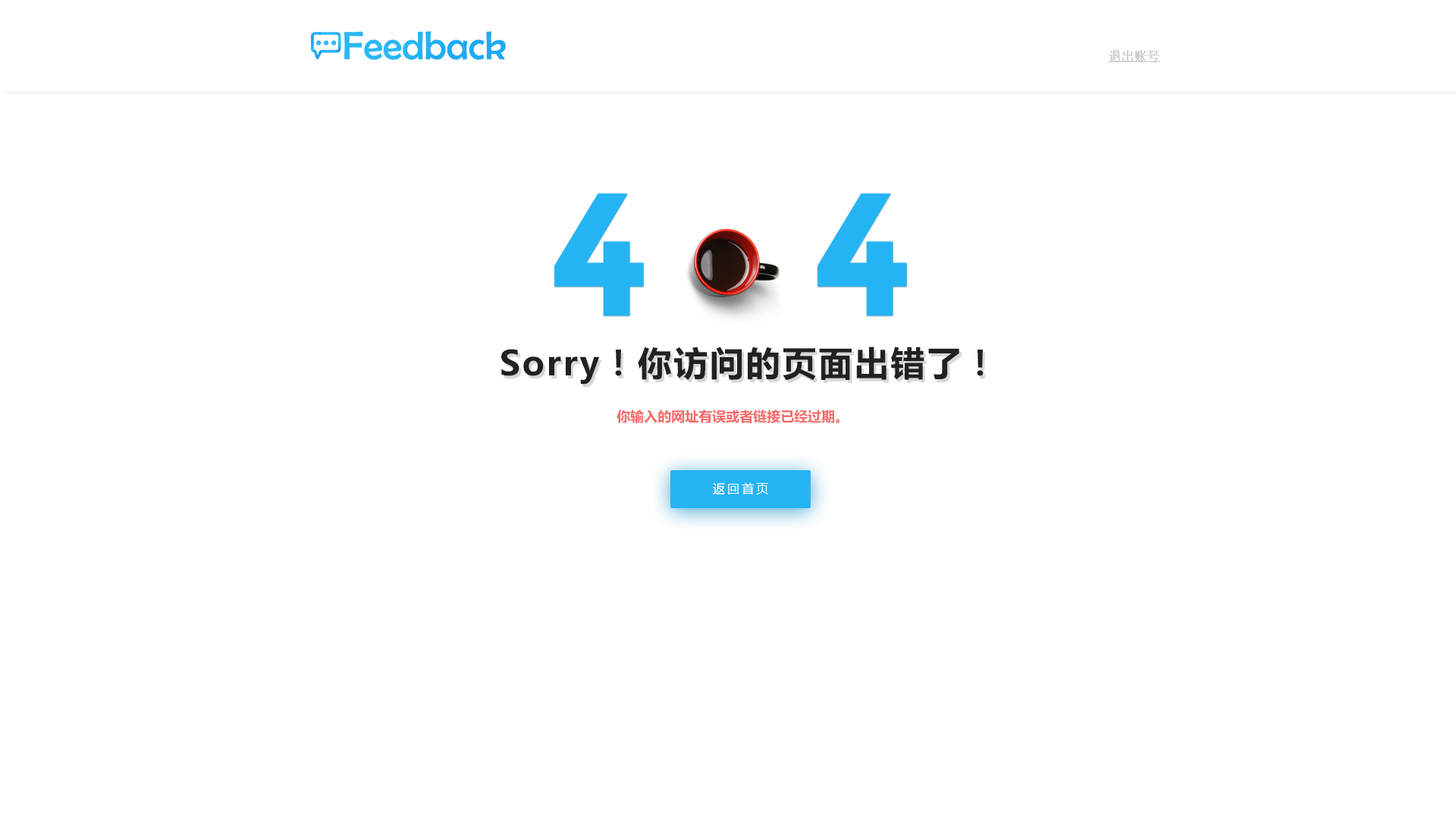
<style>
.page{position:relative;width:1456px;height:819px;background:#ffffff}
.page>*{position:absolute;margin:0}
.t1{font:12.1px "SimSun";color:#cecece;font-weight:bold;text-decoration:underline}
.t2{font:174.4px "Montserrat-Bold";letter-spacing:0.012em;color:#25b4f3;text-transform:uppercase}
.t3{font:34.1px "MicrosoftYaHei-Bold";letter-spacing:0.06em;color:#212121}
.t4{font:13.6px "MicrosoftYaHei-Bold";color:#f56969}
.t5{font:12.1px "MicrosoftYaHei";letter-spacing:0.192em;color:#ffffff;text-transform:uppercase}
</style>
<div class="page">
<p class="t1" style="left:1108px;top:50px;width:52px;height:12px">退出账号</p>
<p class="t2" style="left:554px;top:193px;width:90px;height:122px">4</p>
<p class="t2" style="left:817px;top:193px;width:90px;height:122px">4</p>
<p class="t3" style="left:501px;top:347px;width:483px;height:37px">Sorry！你访问的页面出错了！</p>
<p class="t4" style="left:617px;top:409px;width:222px;height:14px">你输入的网址有误或者链接已经过期。</p>
<p class="t5" style="left:713px;top:482px;width:55px;height:13px">返回首页</p>
</div>
